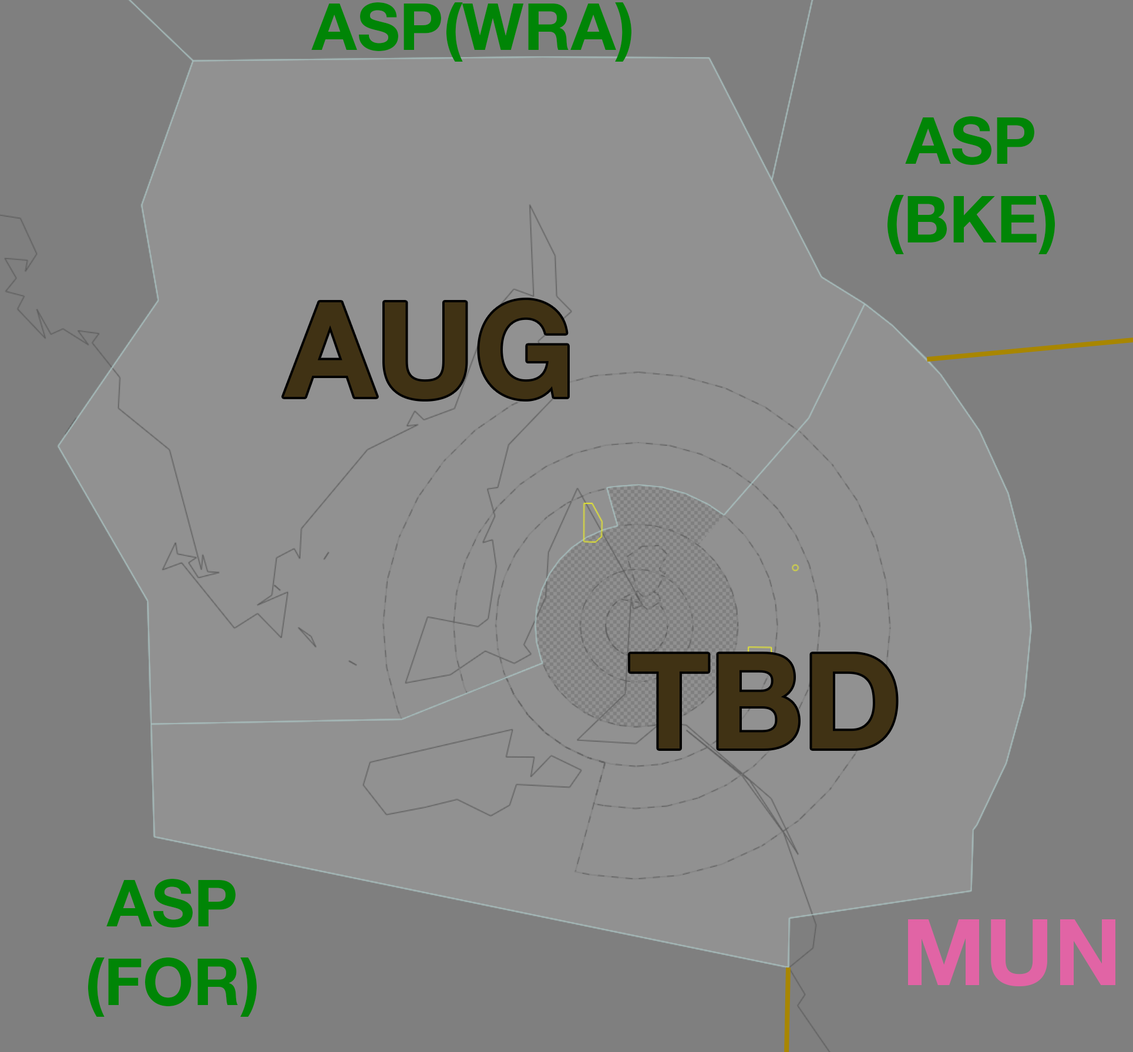
<style>
.page{position:relative;width:1133px;height:1052px;background:#919191}
.page>*{position:absolute;margin:0}
.t1{font:65.3px "HelveticaNeueLTStd-Bd";color:#008506}
.t2{font:132.8px "HelveticaNeueLTStd-Bd";color:#403214}
.t3{font:91.9px "HelveticaNeueLTStd-Bd";color:#e164a5}
</style>
<div class="page">
<p class="t1" style="left:311px;top:2px;width:320px;height:60px">ASP(WRA)</p>
<p class="t1" style="left:887px;top:116px;width:168px;height:138px;text-align:center">ASP<br>(BKE)</p>
<p class="t2" style="left:284px;top:300px;width:283px;height:99px">AUG</p>
<p class="t2" style="left:630px;top:654px;width:266px;height:95px">TBD</p>
<p class="t1" style="left:88px;top:879px;width:169px;height:138px;text-align:center">ASP<br>(FOR)</p>
<p class="t3" style="left:908px;top:920px;width:207px;height:67px">MUN</p>
</div>
